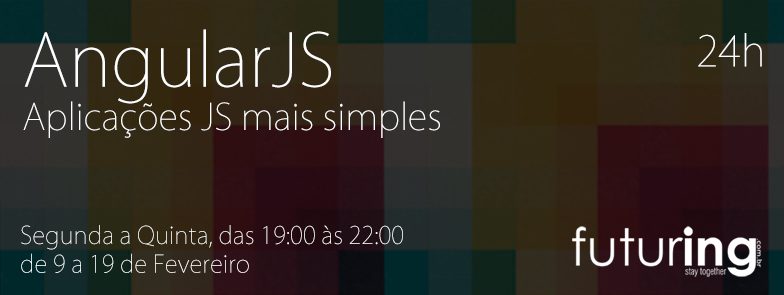
<style>
.page{position:relative;width:784px;height:295px}
.page>*{position:absolute;margin:0}
.t1{font:36px "KozGoPro-ExtraLight";color:#ffffff}
.t2{font:72px "KozGoPro-ExtraLight";color:#ffffff}
.t3{font:42px "KozGoPro-ExtraLight";color:#ffffff}
.t4{font:24px "KozGoPro-ExtraLight";color:#ffffff}
</style>
<div class="page">
<p class="t1" style="left:23px;top:29px;width:417px;height:109px"><span class="t2">AngularJS<br></span>Aplicações JS mais simples</p>
<p class="t3" style="left:698px;top:33px;width:64px;height:34px">24h</p>
<p class="t4" style="left:21px;top:225px;width:382px;height:48px">Segunda a Quinta, das 19:00 às 22:00<br>de 9 a 19 de Fevereiro</p>
</div>
